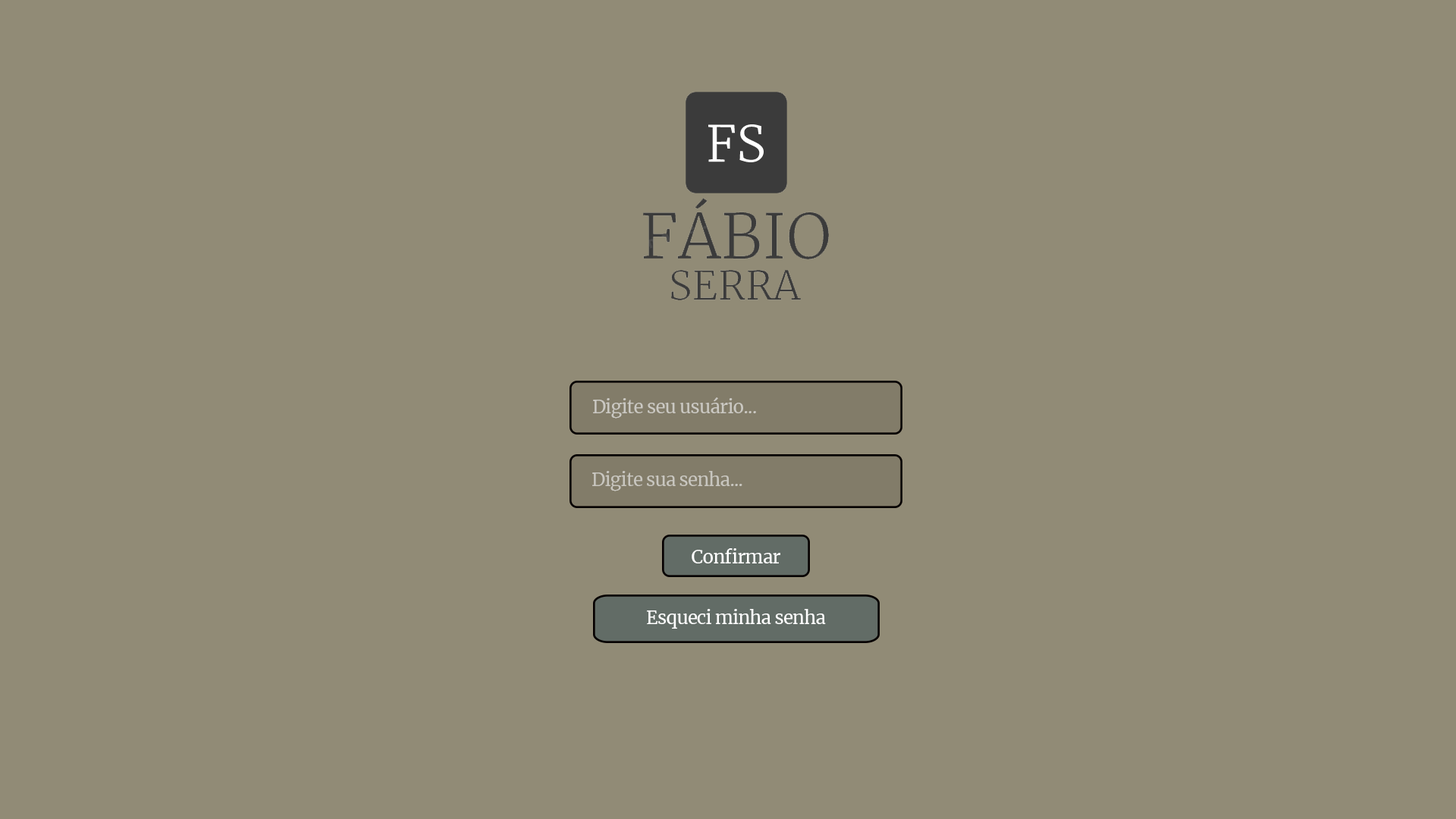
<style>
.page{position:relative;width:1456px;height:819px;background:#918b76}
.page>*{position:absolute;margin:0}
.t1{font:18.2px "Merriweather-Regular";letter-spacing:-0.03em;color:#cac8c2}
.t2{font:18.2px "Merriweather-Regular";letter-spacing:-0.03em;color:#c8c6bf}
.t3{font:18.2px "Merriweather-Regular";letter-spacing:-0.03em;color:#ffffff}
</style>
<div class="page">
<p class="t1" style="left:593px;top:397px;width:163px;height:22px">Digite seu usuário...</p>
<p class="t2" style="left:592px;top:471px;width:150px;height:20px">Digite sua senha...</p>
<p class="t3" style="left:692px;top:548px;width:88px;height:15px">Confirmar</p>
<p class="t3" style="left:647px;top:609px;width:179px;height:20px">Esqueci minha senha</p>
</div>
